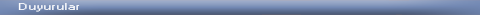
<style>
.page{position:relative;width:480px;height:15px}
.page>*{position:absolute;margin:0}
.t1{font:9px "MS Sans Serif";color:#ffffff;scale:1.6 1}
</style>
<div class="page">
<p class="t1" style="left:18px;top:3px;width:62px;height:9px">Duyurular</p>
</div>
